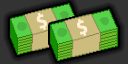
<style>
.page{position:relative;width:128px;height:64px}
.page>*{position:absolute;margin:0}
.t1{font:17.8px "AdobeGothicStd-Bold";color:#ffefd5;text-transform:uppercase;font-weight:bold}
</style>
<div class="page">
<p class="t1" style="left:36px;top:13px;width:11px;height:17px;rotate:-21deg">$</p>
<p class="t1" style="left:77px;top:19px;width:11px;height:17px;rotate:-21deg">$</p>
</div>
